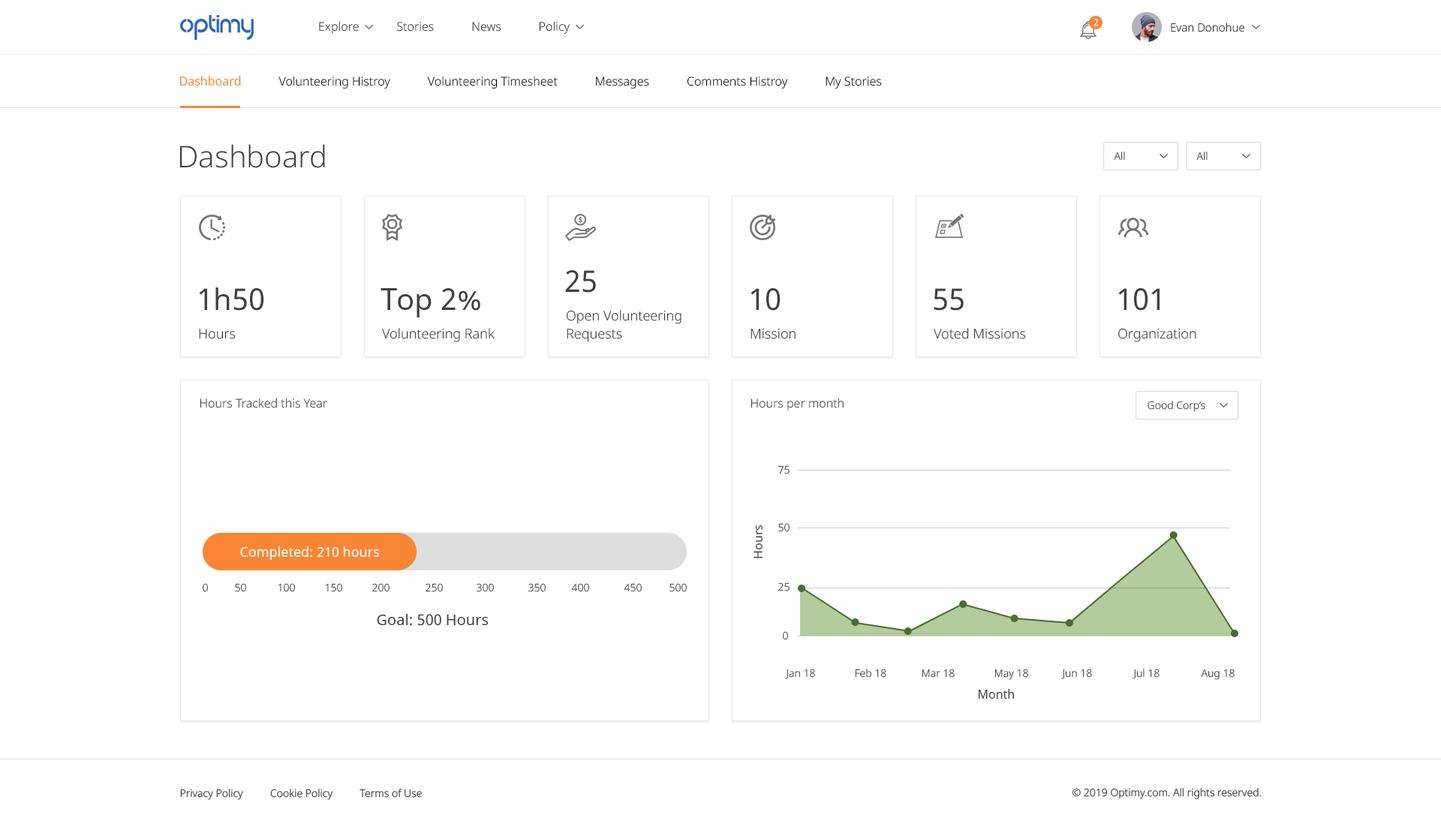
<style>
.page{position:relative;width:1441px;height:827px;background:#ffffff}
.page>*{position:absolute;margin:0}
.t1{font:12px "NotoSans-Light";color:#000000}
.t2{font:12px "NotoSans";color:#f88634}
.t3{font:30px "NotoSans-Light";color:#414141}
.t4{font:10.5px "NotoSans-Light";color:#414141}
.t5{font:30px "NotoSans";color:#414141}
.t6{font:13.5px/18px "NotoSans-Light";color:#414141}
.t7{font:13.5px "NotoSans-Light";color:#414141}
.t8{font:12px "NotoSans-Light";color:#414141}
.t9{font:12px "NotoSans";color:#414141}
.t10{font:13.5px "NotoSans";color:#ffffff}
.t11{font:10.5px "NotoSans-Light"}
.t12{font:15px "NotoSans";color:#414141}
</style>
<div class="page">
<p class="t1" style="left:179px;top:76px;width:703px;height:13px"><span class="t2">Dashboard</span>            Volunteering Histroy            Volunteering Timesheet            Messages            Comments Histroy            My Stories</p>
<p class="t3" style="left:180px;top:144px;width:145px;height:24px">Dashboard</p>
<p class="t4" style="left:1114px;top:152px;width:11px;height:9px">All</p>
<p class="t4" style="left:1197px;top:152px;width:11px;height:9px">All</p>
<p class="t5" style="left:565px;top:270px;width:31px;height:23px">25</p>
<p class="t5" style="left:199px;top:288px;width:65px;height:23px">1h50</p>
<p class="t5" style="left:381px;top:288px;width:99px;height:30px">Top 2%</p>
<p class="t5" style="left:751px;top:288px;width:30px;height:23px">10</p>
<p class="t5" style="left:934px;top:288px;width:30px;height:23px">55</p>
<p class="t5" style="left:1119px;top:288px;width:41px;height:23px">101</p>
<p class="t6" style="left:566px;top:310px;width:116px;height:32px">Open Volunteering<br>Requests</p>
<p class="t7" style="left:199px;top:329px;width:37px;height:10px">Hours</p>
<p class="t7" style="left:382px;top:328px;width:113px;height:14px">Volunteering Rank</p>
<p class="t7" style="left:751px;top:328px;width:45px;height:11px">Mission</p>
<p class="t7" style="left:934px;top:328px;width:92px;height:11px">Voted Missions</p>
<p class="t7" style="left:1118px;top:328px;width:79px;height:14px">Organization</p>
<p class="t8" style="left:200px;top:398px;width:127px;height:10px">Hours Tracked this Year</p>
<p class="t8" style="left:751px;top:398px;width:93px;height:13px">Hours per month</p>
<p class="t4" style="left:1148px;top:401px;width:58px;height:11px">Good Corp’s</p>
<p class="t4" style="left:778px;top:465px;width:12px;height:9px">75</p>
<p class="t9" style="left:754px;top:525px;width:9px;height:34px;rotate:-90deg">Hours</p>
<p class="t4" style="left:778px;top:523px;width:12px;height:9px">50</p>
<p class="t10" style="left:240px;top:547px;width:140px;height:13px">Completed: 210 hours</p>
<p class="t11" style="left:203px;top:583px;width:5px;height:9px">0</p>
<p class="t4" style="left:235px;top:583px;width:11px;height:9px">50</p>
<p class="t4" style="left:278px;top:583px;width:17px;height:9px">100</p>
<p class="t4" style="left:325px;top:583px;width:17px;height:9px">150</p>
<p class="t11" style="left:372px;top:583px;width:18px;height:9px">200</p>
<p class="t4" style="left:426px;top:583px;width:17px;height:9px">250</p>
<p class="t4" style="left:477px;top:583px;width:17px;height:9px">300</p>
<p class="t4" style="left:529px;top:583px;width:17px;height:9px">350</p>
<p class="t11" style="left:571px;top:583px;width:18px;height:9px">400</p>
<p class="t4" style="left:624px;top:583px;width:18px;height:9px">450</p>
<p class="t4" style="left:670px;top:583px;width:17px;height:9px">500</p>
<p class="t4" style="left:778px;top:583px;width:12px;height:9px">25</p>
<p class="t12" style="left:377px;top:614px;width:112px;height:12px">Goal: 500 Hours</p>
<p class="t11" style="left:783px;top:631px;width:5px;height:9px">0</p>
<p class="t4" style="left:785px;top:669px;width:30px;height:10px">Jan 18</p>
<p class="t4" style="left:855px;top:669px;width:32px;height:9px">Feb 18</p>
<p class="t4" style="left:922px;top:669px;width:33px;height:9px">Mar 18</p>
<p class="t4" style="left:995px;top:669px;width:33px;height:11px">May 18</p>
<p class="t4" style="left:1062px;top:669px;width:30px;height:10px">Jun 18</p>
<p class="t4" style="left:1133px;top:669px;width:27px;height:10px">Jul 18</p>
<p class="t4" style="left:1201px;top:669px;width:34px;height:11px">Aug 18</p>
<p class="t9" style="left:978px;top:689px;width:36px;height:10px">Month</p>
</div>
